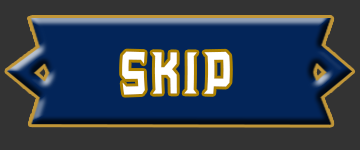
<style>
.page{position:relative;width:360px;height:150px;background:#032559}
.page>*{position:absolute;margin:0}
.t1{font:62.5px "Lorde-Havana";letter-spacing:0.1em;color:#ffffff;scale:0.75 1}
</style>
<div class="page">
<p class="t1" style="left:122px;top:51px;width:108px;height:44px">skip</p>
</div>
